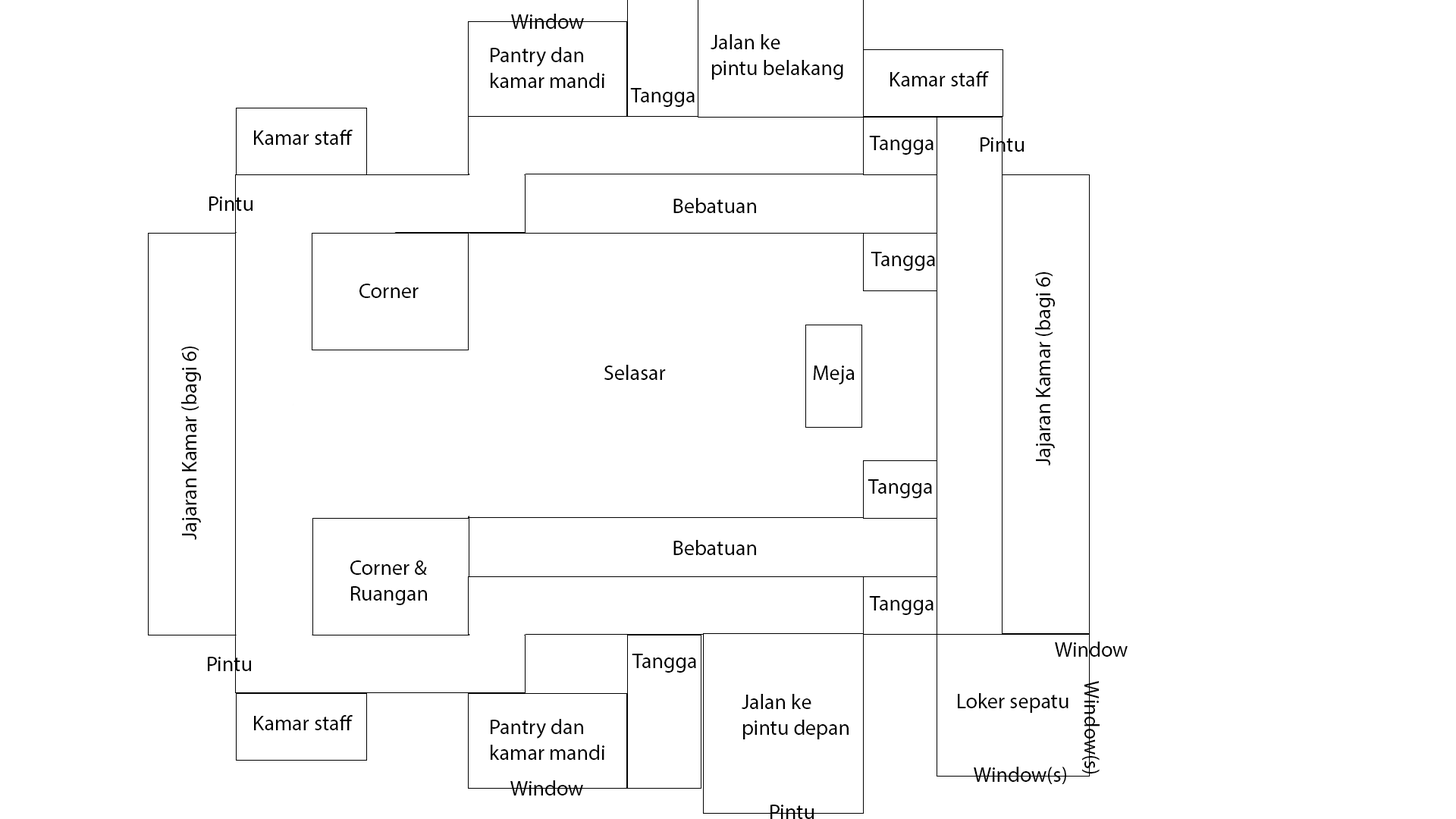
<style>
.page{position:relative;width:1456px;height:819px;background:#ffffff}
.page>*{position:absolute;margin:0}
.t1{font:21.2px "MyriadPro-Regular";color:#000000}
</style>
<div class="page">
<p class="t1" style="left:511px;top:14px;width:73px;height:15px">Window</p>
<p class="t1" style="left:711px;top:34px;width:132px;height:46px">Jalan ke <br>pintu belakang</p>
<p class="t1" style="left:491px;top:47px;width:113px;height:41px">Pantry dan <br>kamar mandi</p>
<p class="t1" style="left:890px;top:71px;width:99px;height:15px">Kamar staff</p>
<p class="t1" style="left:630px;top:88px;width:65px;height:19px">Tangga</p>
<p class="t1" style="left:254px;top:130px;width:99px;height:15px">Kamar staff</p>
<p class="t1" style="left:869px;top:136px;width:64px;height:19px">Tangga</p>
<p class="t1" style="left:981px;top:137px;width:43px;height:15px">Pintu</p>
<p class="t1" style="left:209px;top:196px;width:44px;height:15px">Pintu</p>
<p class="t1" style="left:673px;top:198px;width:83px;height:15px">Bebatuan</p>
<p class="t1" style="left:871px;top:252px;width:64px;height:19px">Tangga</p>
<p class="t1" style="left:1035px;top:272px;width:20px;height:194px;rotate:-90deg">Jajaran Kamar (bagi 6)</p>
<p class="t1" style="left:359px;top:284px;width:60px;height:14px">Corner</p>
<p class="t1" style="left:181px;top:347px;width:20px;height:193px;rotate:-90deg">Jajaran Kamar (bagi 6)</p>
<p class="t1" style="left:604px;top:365px;width:62px;height:15px">Selasar</p>
<p class="t1" style="left:813px;top:366px;width:42px;height:18px">Meja</p>
<p class="t1" style="left:868px;top:479px;width:64px;height:19px">Tangga</p>
<p class="t1" style="left:673px;top:540px;width:83px;height:15px">Bebatuan</p>
<p class="t1" style="left:350px;top:560px;width:77px;height:45px">Corner &amp;<br>Ruangan</p>
<p class="t1" style="left:869px;top:596px;width:64px;height:19px">Tangga</p>
<p class="t1" style="left:1055px;top:642px;width:73px;height:15px">Window</p>
<p class="t1" style="left:632px;top:654px;width:64px;height:19px">Tangga</p>
<p class="t1" style="left:208px;top:657px;width:43px;height:14px">Pintu</p>
<p class="t1" style="left:1082px;top:681px;width:18px;height:92px;rotate:90deg">Window(s)</p>
<p class="t1" style="left:742px;top:694px;width:107px;height:45px">Jalan ke <br>pintu depan</p>
<p class="t1" style="left:958px;top:693px;width:110px;height:20px">Loker sepatu</p>
<p class="t1" style="left:254px;top:715px;width:99px;height:15px">Kamar staff</p>
<p class="t1" style="left:491px;top:719px;width:113px;height:41px">Pantry dan <br>kamar mandi</p>
<p class="t1" style="left:974px;top:767px;width:92px;height:17px">Window(s)</p>
<p class="t1" style="left:510px;top:780px;width:73px;height:15px">Window</p>
<p class="t1" style="left:770px;top:805px;width:44px;height:14px">Pintu</p>
</div>
